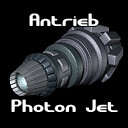
<style>
.page{position:relative;width:128px;height:128px;background:#000000}
.page>*{position:absolute;margin:0}
.t1{font:18px "GravitateBRK";color:#ffffff}
</style>
<div class="page">
<p class="t1" style="left:29px;top:13px;width:70px;height:13px">Antrieb</p>
<p class="t1" style="left:11px;top:99px;width:107px;height:13px">Photon Jet</p>
</div>
